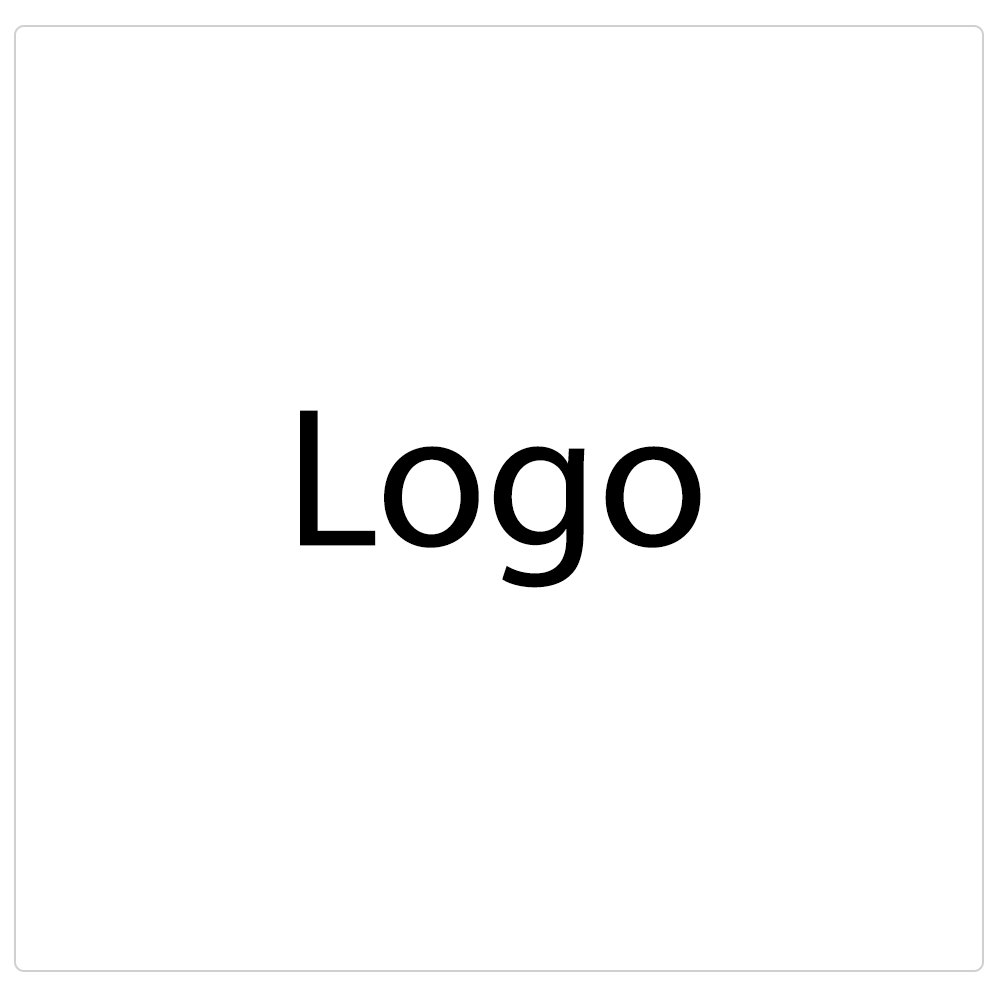
<style>
.page{position:relative;width:1000px;height:1000px;background:#ffffff}
.page>*{position:absolute;margin:0}
.t1{font:200px "MyriadPro-Regular";color:#010000}
</style>
<div class="page">
<p class="t1" style="left:300px;top:410px;width:401px;height:178px">Logo</p>
</div>
